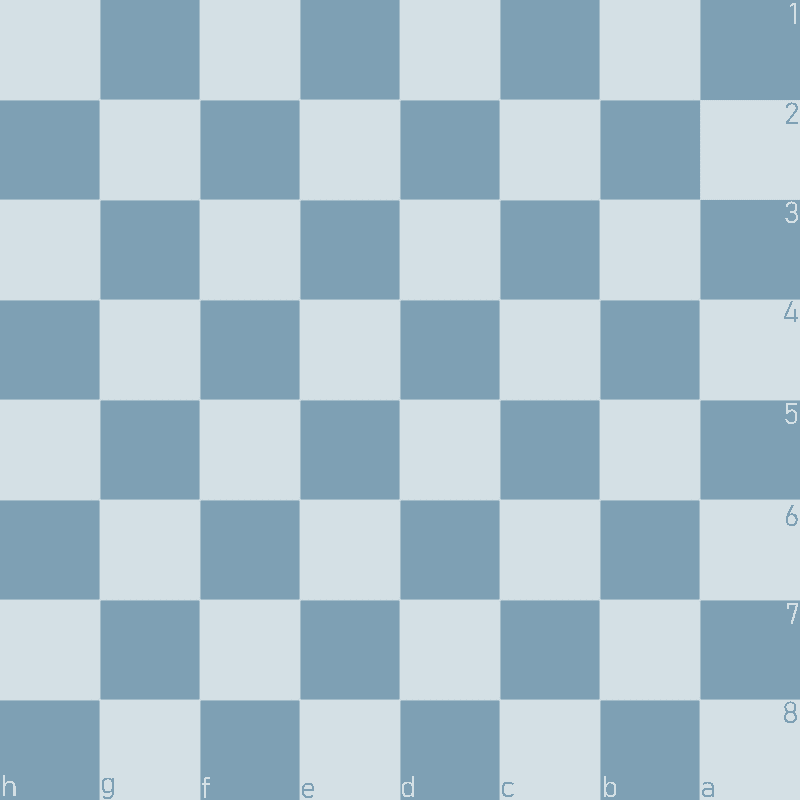
<style>
.page{position:relative;width:800px;height:800px;background:#d4e0e5}
.page>*{position:absolute;margin:0}
.t1{font:30px "Bahnschrift";color:#d4e0e5}
.t2{font:30px "Bahnschrift";color:#7ea0b4}
</style>
<div class="page">
<p class="t1" style="left:790px;top:3px;width:6px;height:21px">1</p>
<p class="t2" style="left:786px;top:102px;width:12px;height:22px">2</p>
<p class="t1" style="left:785px;top:201px;width:13px;height:22px">3</p>
<p class="t2" style="left:784px;top:301px;width:14px;height:21px">4</p>
<p class="t1" style="left:785px;top:403px;width:12px;height:21px">5</p>
<p class="t2" style="left:786px;top:505px;width:12px;height:21px">6</p>
<p class="t1" style="left:787px;top:603px;width:11px;height:21px">7</p>
<p class="t2" style="left:784px;top:701px;width:13px;height:22px">8</p>
<p class="t1" style="left:3px;top:775px;width:13px;height:21px">h</p>
<p class="t2" style="left:102px;top:778px;width:12px;height:21px">g</p>
<p class="t1" style="left:202px;top:777px;width:8px;height:21px">f</p>
<p class="t2" style="left:302px;top:783px;width:12px;height:15px">e</p>
<p class="t1" style="left:402px;top:776px;width:12px;height:21px">d</p>
<p class="t2" style="left:502px;top:782px;width:12px;height:15px">c</p>
<p class="t1" style="left:604px;top:776px;width:12px;height:21px">b</p>
<p class="t2" style="left:702px;top:782px;width:12px;height:15px">a</p>
</div>
